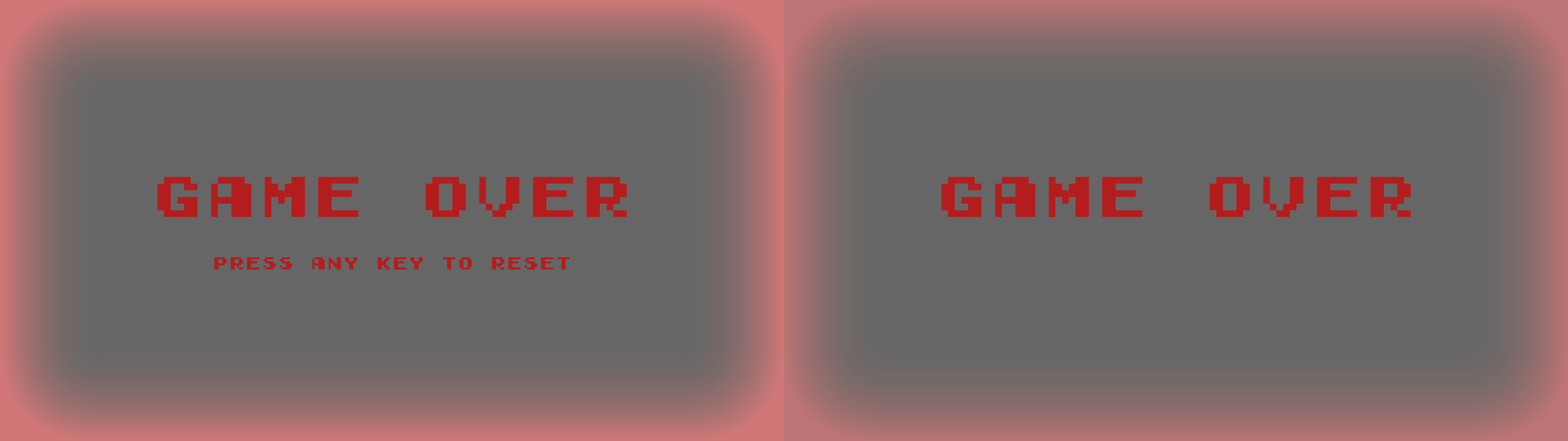
<style>
.page{position:relative;width:1568px;height:441px;background:#666666}
.page>*{position:absolute;margin:0}
.t1{font:53.6px "GamegirlClassic";color:#b41d1d}
.t2{font:16.3px "GamegirlClassic";color:#b41d1d}
</style>
<div class="page">
<p class="t1" style="left:157px;top:177px;width:470px;height:40px">game over</p>
<p class="t1" style="left:941px;top:177px;width:470px;height:40px">game over</p>
<p class="t2" style="left:214px;top:257px;width:356px;height:13px">Press any key to reset</p>
</div>
